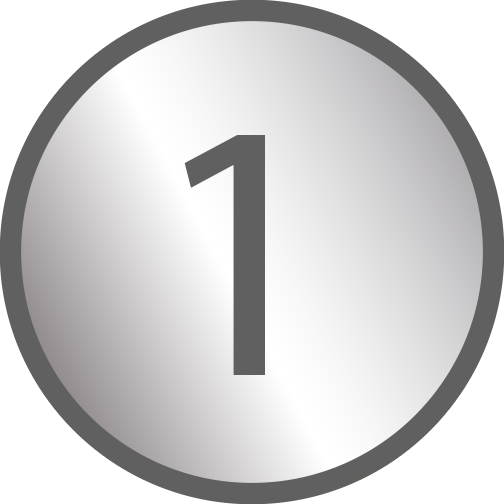
<style>
.page{position:relative;width:504px;height:504px;background:#ffffff}
.page>*{position:absolute;margin:0}
.t1{font:370px "MyriadPro-Regular";color:#606060}
</style>
<div class="page">
<p class="t1" style="left:184px;top:135px;width:81px;height:240px">1</p>
</div>
